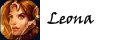
<style>
.page{position:relative;width:140px;height:40px;background:#ffffff}
.page>*{position:absolute;margin:0}
.t1{font:12px "VinerHandITC";color:#000000}
</style>
<div class="page">
<p class="t1" style="left:47px;top:11px;width:47px;height:14px">Leona</p>
</div>
